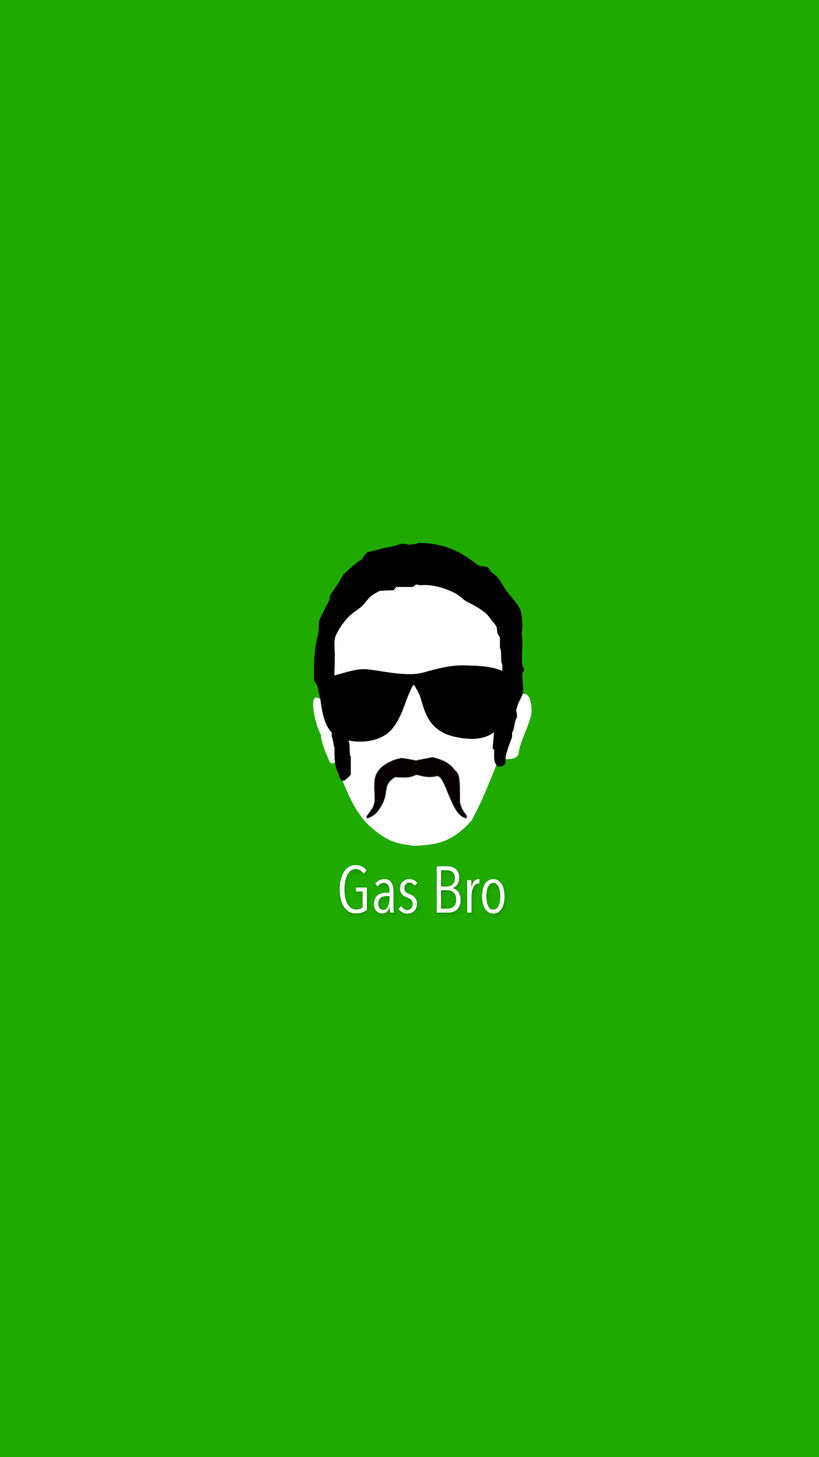
<style>
.page{position:relative;width:819px;height:1457px;background:#20aa00}
.page>*{position:absolute;margin:0}
.t1{font:65.5px "AvenirNextCondensed-Regular";color:#ffffff}
</style>
<div class="page">
<p class="t1" style="left:339px;top:865px;width:166px;height:49px">Gas Bro</p>
</div>
